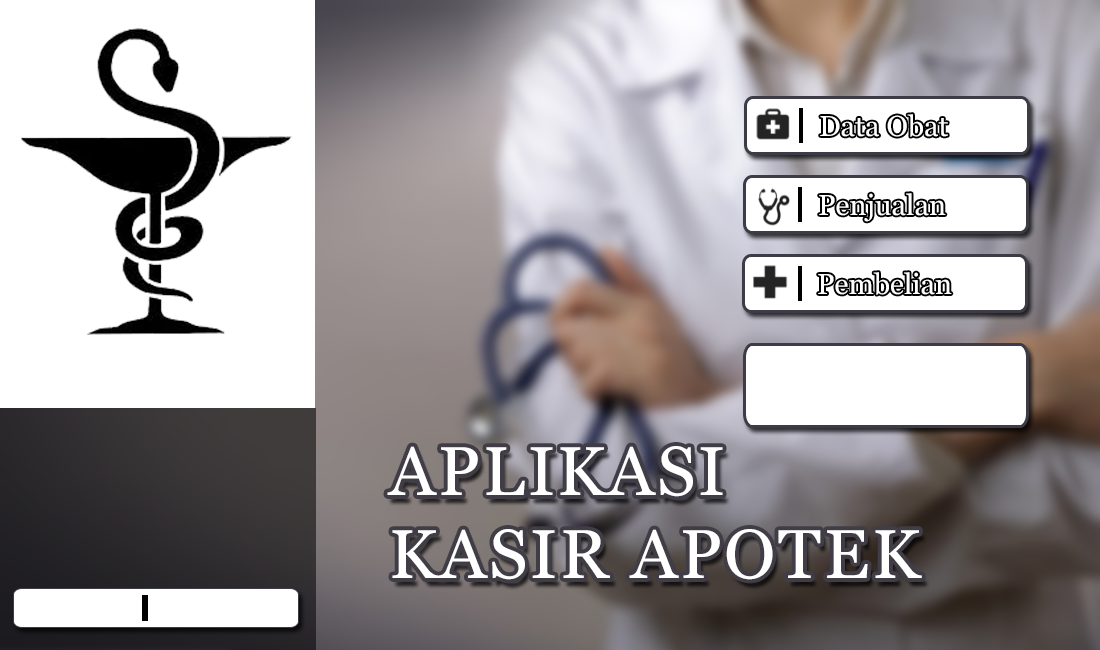
<style>
.page{position:relative;width:1100px;height:650px;background:#ffffff}
.page>*{position:absolute;margin:0}
.t1{font:28.7px "Georgia";color:#ffffff}
.t2{font:68.7px "Georgia";letter-spacing:0.04em;color:#ffffff}
</style>
<div class="page">
<p class="t1" style="left:820px;top:114px;width:128px;height:23px">Data Obat</p>
<p class="t1" style="left:818px;top:272px;width:134px;height:23px">Pembelian</p>
<p class="t2" style="left:387px;top:446px;width:535px;height:134px">APLIKASI <br>KASIR APOTEK</p>
</div>
